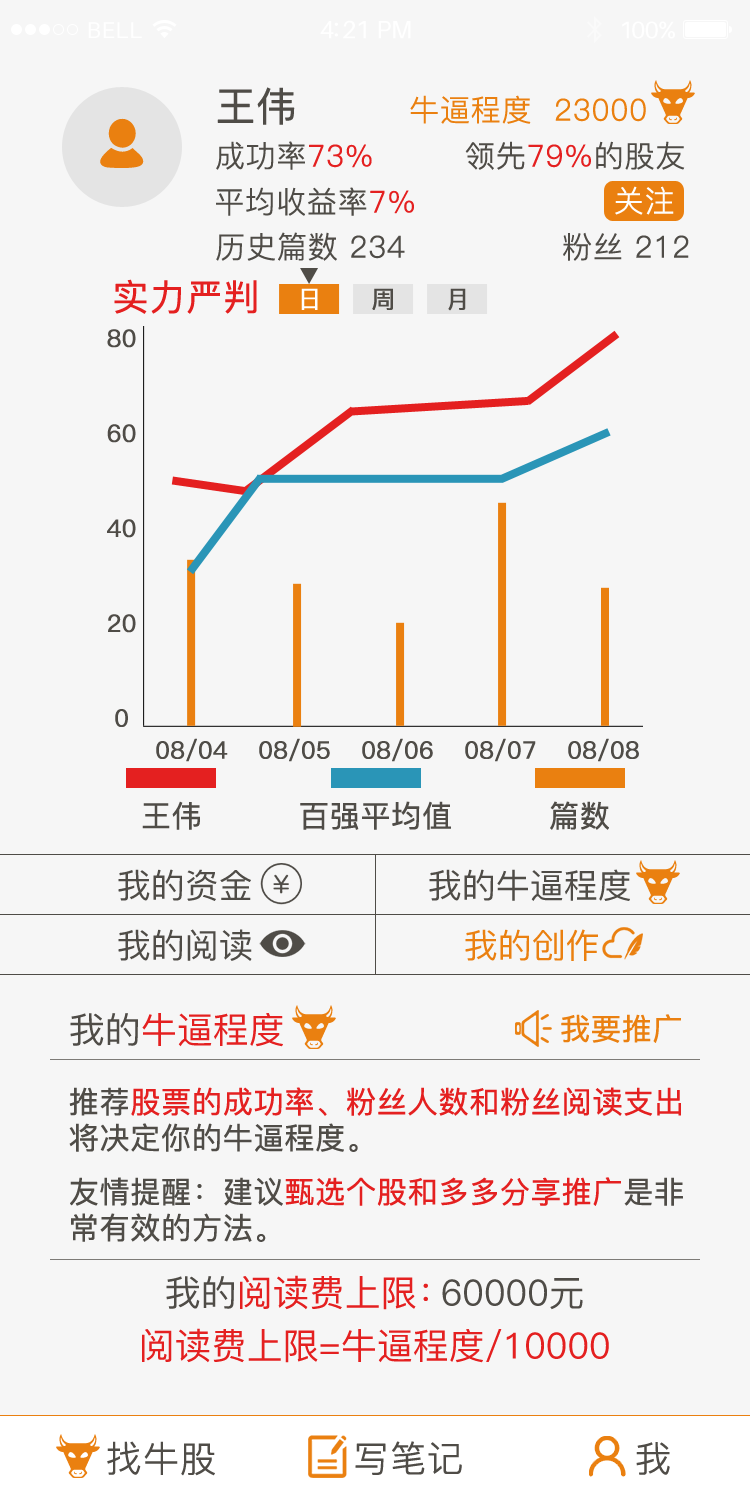
<style>
.page{position:relative;width:750px;height:1506px;background:#f6f6f6}
.page>*{position:absolute;margin:0}
.t1{font:23px "Aileron-Regular";letter-spacing:0.02em;color:#ffffff}
.t2{font:25px "Aileron-Regular";letter-spacing:-0.02em;color:#ffffff}
.t3{font:24px "Aileron-Regular";letter-spacing:-0.02em;color:#ffffff}
.t4{font:40px "PingFang-SC-Medium";color:#4f4c47;font-weight:bold}
.t5{font:30px "PingFang-SC-Regular";color:#ea8010;font-weight:bold}
.t6{font:30px "PingFang-SC-Regular";color:#4f4c47;font-weight:bold}
.t7{font:30px "PingFang-SC-Regular";color:#e42020;font-weight:bold}
.t8{font:30px "PingFang-SC-Regular";color:#fefefe;font-weight:bold}
.t9{font:36px "PingFang-SC-Medium";color:#e42020;font-weight:bold}
.t10{font:24px "PingFang-SC-Medium";color:#ffffff;font-weight:bold}
.t11{font:24px "PingFang-SC-Medium";color:#4f4c47;font-weight:bold}
.t12{font:30px "PingFang-SC-Medium";color:#4f4c47;font-weight:bold}
.t13{font:34px "PingFang-SC-Medium";color:#4f4c47}
.t14{font:34px "PingFang-SC-Medium";color:#ea8010}
.t15{font:36px "PingFang-SC-Medium";color:#e42020}
.t16{font:36px "PingFang-SC-Medium";color:#4f4c47}
.t17{font:30px "PingFang-SC-Medium";color:#ea8010;font-weight:bold}
.t18{font:30px "PingFang-SC-Medium";color:#e42020;font-weight:bold}
.t19{font:36px "PingFang-SC-Regular";color:#4f4c47;font-weight:bold}
</style>
<div class="page">
<p class="t1" style="left:88px;top:22px;width:54px;height:16px">BELL</p>
<p class="t2" style="left:320px;top:20px;width:91px;height:19px">4:21 PM</p>
<p class="t3" style="left:622px;top:21px;width:53px;height:18px">100%</p>
<p class="t4" style="left:217px;top:87px;width:78px;height:38px">王伟</p>
<p class="t5" style="left:410px;top:95px;width:236px;height:29px">牛逼程度  23000</p>
<p class="t6" style="left:216px;top:141px;width:156px;height:29px">成功率<span class="t7">73%</span></p>
<p class="t7" style="left:465px;top:141px;width:220px;height:29px"><span class="t6">领先</span>79%<span class="t6">的股友</span></p>
<p class="t6" style="left:216px;top:187px;width:198px;height:29px">平均收益率<span class="t7">7%</span></p>
<p class="t8" style="left:615px;top:186px;width:59px;height:29px">关注</p>
<p class="t6" style="left:216px;top:232px;width:189px;height:29px">历史篇数 234</p>
<p class="t6" style="left:563px;top:232px;width:126px;height:29px">粉丝 212</p>
<p class="t9" style="left:114px;top:279px;width:143px;height:35px">实力严判</p>
<p class="t10" style="left:301px;top:288px;width:17px;height:22px">日</p>
<p class="t11" style="left:372px;top:288px;width:21px;height:22px">周</p>
<p class="t11" style="left:448px;top:288px;width:18px;height:23px">月</p>
<p class="t11" style="left:107px;top:329px;width:29px;height:19px">80</p>
<p class="t11" style="left:107px;top:424px;width:29px;height:19px">60</p>
<p class="t11" style="left:107px;top:519px;width:29px;height:19px">40</p>
<p class="t11" style="left:108px;top:614px;width:28px;height:19px">20</p>
<p class="t11" style="left:115px;top:709px;width:13px;height:18px">0</p>
<p class="t11" style="left:156px;top:738px;width:72px;height:24px">08/04</p>
<p class="t11" style="left:259px;top:738px;width:71px;height:24px">08/05</p>
<p class="t11" style="left:362px;top:738px;width:71px;height:24px">08/06</p>
<p class="t11" style="left:465px;top:738px;width:71px;height:24px">08/07</p>
<p class="t11" style="left:568px;top:738px;width:71px;height:24px">08/08</p>
<p class="t12" style="left:142px;top:801px;width:58px;height:29px">王伟</p>
<p class="t12" style="left:300px;top:801px;width:151px;height:29px">百强平均值</p>
<p class="t12" style="left:550px;top:801px;width:59px;height:29px">篇数</p>
<p class="t13" style="left:118px;top:869px;width:133px;height:32px">我的资金</p>
<p class="t13" style="left:429px;top:869px;width:201px;height:32px">我的牛逼程度</p>
<p class="t13" style="left:118px;top:929px;width:134px;height:32px">我的阅读</p>
<p class="t14" style="left:465px;top:929px;width:133px;height:32px">我的创作</p>
<p class="t15" style="left:70px;top:1013px;width:213px;height:34px"><span class="t16">我的</span>牛逼程度</p>
<p class="t17" style="left:561px;top:1014px;width:120px;height:29px">我要推广</p>
<p class="t18" style="left:69px;top:1087px;width:612px;height:65px"><span class="t12">推荐</span>股票的成功率、粉丝人数和粉丝阅读支出<br><span class="t12">将决定你的牛逼程度。</span></p>
<p class="t18" style="left:70px;top:1177px;width:613px;height:65px"><span class="t12">友情提醒：建议</span>甄选个股和多多分享推广<span class="t12">是非<br>常有效的方法。</span></p>
<p class="t15" style="left:166px;top:1275px;width:262px;height:35px"><span class="t16">我的</span>阅读费上限：</p>
<p class="t16" style="left:442px;top:1278px;width:141px;height:32px">60000元</p>
<p class="t15" style="left:142px;top:1328px;width:467px;height:35px">阅读费上限=牛逼程度/10000</p>
<p class="t19" style="left:107px;top:1441px;width:108px;height:35px">找牛股</p>
<p class="t19" style="left:355px;top:1441px;width:107px;height:34px">写笔记</p>
<p class="t19" style="left:636px;top:1442px;width:34px;height:33px">我</p>
</div>
